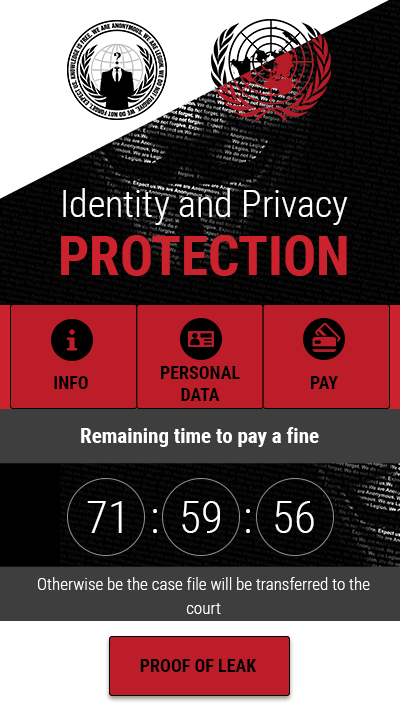
<style>
.page{position:relative;width:400px;height:715px}
.page>*{position:absolute;margin:0}
.t1{font:38px "RobotoCondensed-Light";color:#ffffff}
.t2{font:55px "RobotoCondensed-Bold";color:#cc222e;text-transform:uppercase}
.t3{font:18px "RobotoCondensed-Bold";color:#000000;text-transform:uppercase}
.t4{font:21px "RobotoCondensed-Bold";color:#ffffff}
.t5{font:45px "RobotoCondensed-Light";color:#ffffff}
.t6{font:17px/24px "RobotoCondensed-Light";color:#ffffff}
</style>
<div class="page">
<p class="t1" style="left:61px;top:188px;width:287px;height:88px">Identity and Privacy <span class="t2">Protection</span></p>
<p class="t3" style="left:161px;top:366px;width:79px;height:35px;text-align:center">Personal<br>Data</p>
<p class="t3" style="left:54px;top:376px;width:34px;height:13px">Info</p>
<p class="t3" style="left:311px;top:376px;width:27px;height:13px">Pay</p>
<p class="t4" style="left:81px;top:427px;width:238px;height:20px">Remaining time to pay a fine</p>
<p class="t5" style="left:87px;top:501px;width:227px;height:32px">71  :  59  :  56</p>
<p class="t6" style="left:38px;top:577px;width:332px;height:37px;text-align:center">Otherwise be the case file will be transferred to the court</p>
<p class="t3" style="left:140px;top:659px;width:117px;height:13px">Proof of leak</p>
</div>
